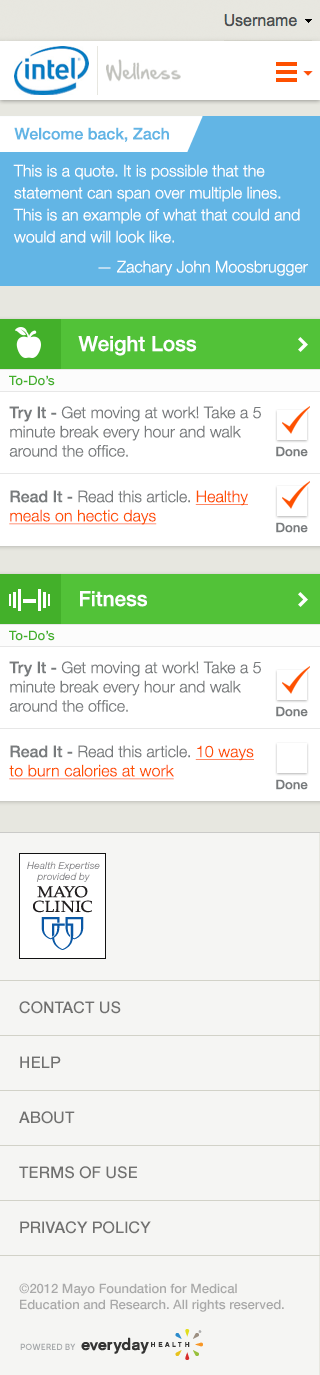
<style>
.page{position:relative;width:320px;height:1375px;background:#f5f5f3}
.page>*{position:absolute;margin:0}
.t1{font:16px "HelveticaNeue-Medium";color:#62b5e5}
.t2{font:16px/22px "HelveticaNeue-Light";color:#ffffff}
.t3{font:16px "HelveticaNeue-Light";color:#ffffff}
.t4{font:21px "HelveticaNeue-Medium";color:#ffffff}
.t5{font:13px "HelveticaNeue-Medium";color:#43b02a}
.t6{font:16px "HelveticaNeue-Light";color:#787b7d}
.t7{font:16px "HelveticaNeue-Medium";color:#787b7d}
.t8{font:13px "HelveticaNeue-Medium";color:#787b7d}
.t9{font:16px "HelveticaNeue-Light";letter-spacing:0.005em;color:#fe5000;text-decoration:underline}
.t10{font:10px/10.4px "HelveticaNeue-Italic";letter-spacing:-0.01em;color:#808083}
.t11{font:16px/55px "HelveticaNeue-Medium";color:#70706f;text-transform:uppercase}
.t12{font:13px "HelveticaNeue-Medium";color:#a9a9a9}
</style>
<div class="page">
<p class="t1" style="left:14px;top:127px;width:155px;height:15px">Welcome back, Zach</p>
<p class="t2" style="left:13px;top:164px;width:287px;height:79px">This is a quote. It is possible that the statement can span over multiple lines. This is an example of what that could and would and will look like.</p>
<p class="t3" style="left:98px;top:260px;width:210px;height:16px">— Zachary John Moosbrugger</p>
<p class="t4" style="left:78px;top:336px;width:119px;height:20px">Weight Loss</p>
<p class="t5" style="left:9px;top:375px;width:46px;height:11px">To-Do’s</p>
<p class="t6" style="left:9px;top:406px;width:252px;height:51px"><span class="t7">Try It -</span> Get moving at work! Take a 5 minute break every hour and walk around the office.</p>
<p class="t8" style="left:276px;top:446px;width:32px;height:11px">Done</p>
<p class="t9" style="left:9px;top:490px;width:239px;height:35px"><span class="t7">Read It - </span><span class="t6">Read this article. </span>Healthy meals on hectic days</p>
<p class="t8" style="left:276px;top:522px;width:32px;height:11px">Done</p>
<p class="t4" style="left:80px;top:591px;width:67px;height:16px">Fitness</p>
<p class="t5" style="left:9px;top:630px;width:46px;height:11px">To-Do’s</p>
<p class="t6" style="left:9px;top:661px;width:252px;height:51px"><span class="t7">Try It -</span> Get moving at work! Take a 5 minute break every hour and walk around the office.</p>
<p class="t8" style="left:276px;top:706px;width:32px;height:11px">Done</p>
<p class="t9" style="left:9px;top:745px;width:245px;height:35px"><span class="t7">Read It - </span><span class="t6">Read this article. </span>10 ways to burn calories at work</p>
<p class="t8" style="left:276px;top:779px;width:32px;height:11px">Done</p>
<p class="t10" style="left:27px;top:861px;width:73px;height:21px;text-align:center">Health Expertise<br>provided by</p>
<p class="t11" style="left:19px;top:1001px;width:132px;height:233px">Contact us<br>Help<br>About<br>Terms Of Use<br>Privacy policy</p>
<p class="t12" style="left:19px;top:1283px;width:265px;height:29px">©2012 Mayo Foundation for Medical Education and Research. All rights reserved.</p>
</div>
